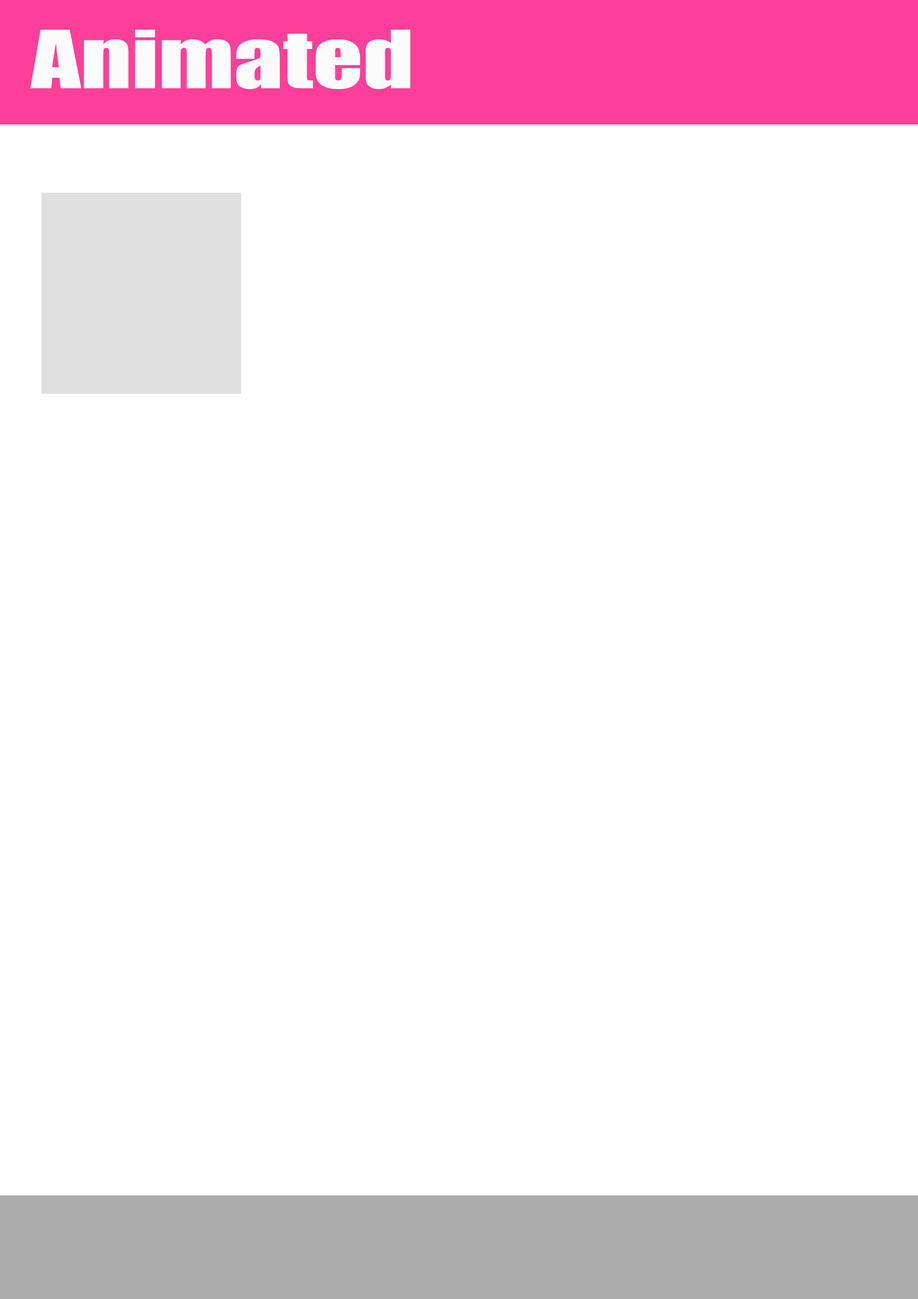
<style>
.page{position:relative;width:918px;height:1299px;background:#ffffff}
.page>*{position:absolute;margin:0}
.t1{font:74.1px "Impact";color:#fbfbfb;scale:1.32 1}
</style>
<div class="page">
<p class="t1" style="left:30px;top:30px;width:381px;height:59px">Animated</p>
</div>
